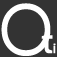
<style>
.page{position:relative;width:57px;height:57px;background:#333333}
.page>*{position:absolute;margin:0}
.t1{font:77.4px "Questrial-Regular";color:#ffffff;scale:0.93 1}
.t2{font:33.1px "Exo-DemiBold";color:#ffffff;scale:0.93 1}
.t3{font:13.3px "Exo-DemiBold";color:#ffffff;scale:0.93 1}
</style>
<div class="page">
<p class="t1" style="left:1px;top:3px;width:50px;height:53px">O</p>
<p class="t2" style="left:41px;top:30px;width:15px;height:24px">t<span class="t3">i</span></p>
</div>
